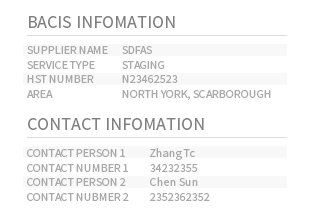
<style>
.page{position:relative;width:316px;height:218px;background:#ffffff}
.page>*{position:absolute;margin:0}
.t1{font:18px "SourceSansPro-Regular";color:#808080}
.t2{font:12px "SourceSansPro-Regular";color:#a9a9a9}
</style>
<div class="page">
<p class="t1" style="left:29px;top:16px;width:146px;height:12px">BACIS INFOMATION</p>
<p class="t2" style="left:27px;top:46px;width:81px;height:52px">SUPPLIER NAME<br>SERVICE TYPE<br>HST NUMBER<br>AREA</p>
<p class="t2" style="left:122px;top:46px;width:149px;height:54px">SDFAS <br>STAGING<br>N23462523<br>NORTH YORK, SCARBOROUGH</p>
<p class="t1" style="left:28px;top:118px;width:176px;height:12px">CONTACT INFOMATION</p>
<p class="t2" style="left:27px;top:149px;width:102px;height:52px">CONTACT PERSON 1<br>CONTACT NUMBER 1<br>CONTACT PERSON 2<br>CONTACT NUBMER 2</p>
<p class="t2" style="left:150px;top:148px;width:60px;height:53px">Zhang Tc<br>34232355<br>Chen Sun<br>2352362352</p>
</div>
